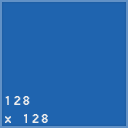
<style>
.page{position:relative;width:128px;height:128px;background:#1f64af}
.page>*{position:absolute;margin:0}
.t1{font:14.7px/18.7px "Fixedsys";color:#ededed}
</style>
<div class="page">
<p class="t1" style="left:5px;top:96px;width:43px;height:27px">128<br>x 128</p>
</div>
